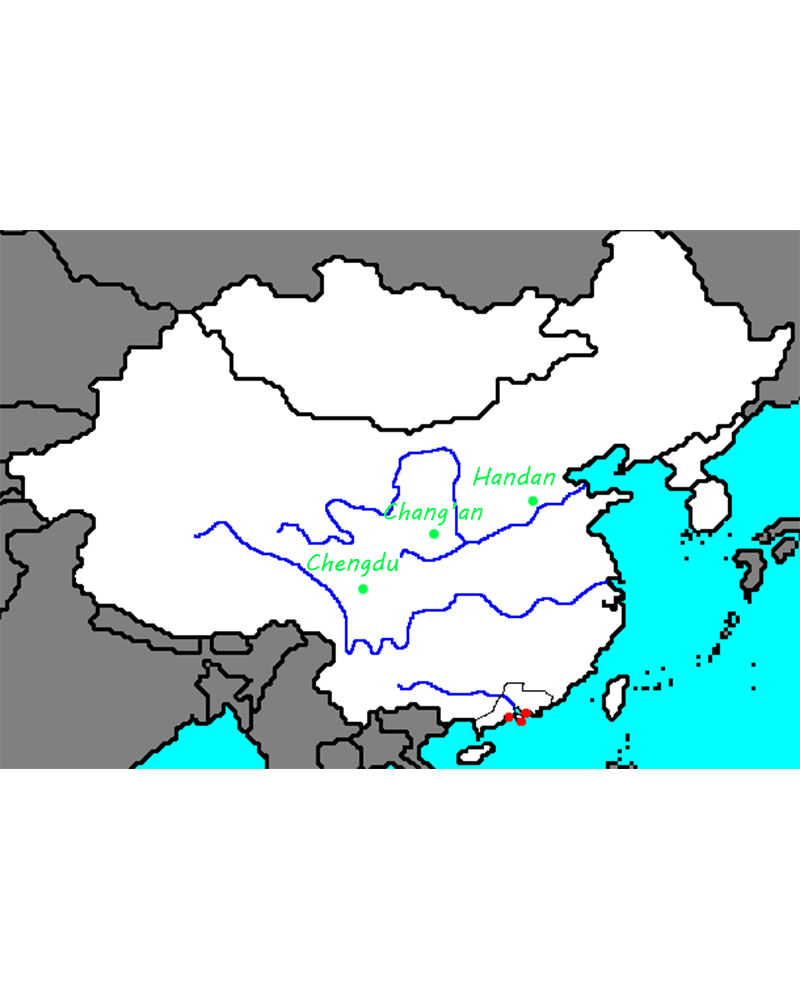
<style>
.page{position:relative;width:800px;height:1000px;background:#ffffff}
.page>*{position:absolute;margin:0}
.t1{font:25px "MVBoli";color:#00ff48}
</style>
<div class="page">
<p class="t1" style="left:473px;top:465px;width:82px;height:21px">Handan</p>
<p class="t1" style="left:384px;top:501px;width:99px;height:25px">Chang’an</p>
<p class="t1" style="left:307px;top:551px;width:92px;height:26px">Chengdu</p>
</div>
